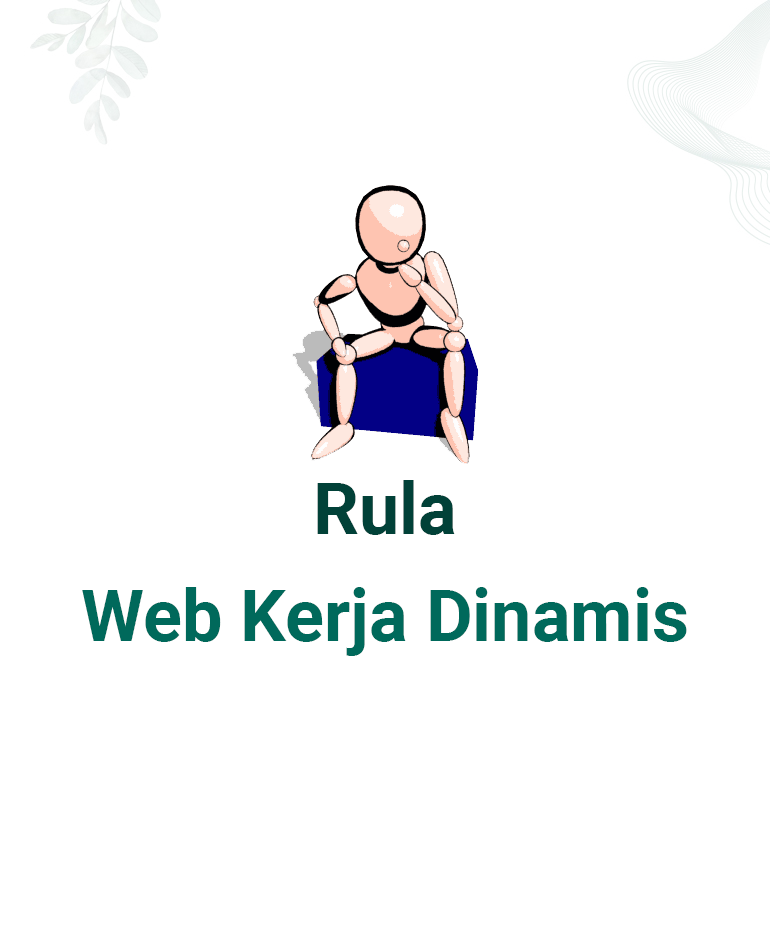
<style>
.page{position:relative;width:770px;height:927px;background:#ffffff}
.page>*{position:absolute;margin:0}
.t1{font:72px "Roboto-Bold";color:#014138}
.t2{font:72px "Roboto-Bold";color:#00695b}
</style>
<div class="page">
<p class="t1" style="left:317px;top:480px;width:138px;height:55px">Rula</p>
<p class="t2" style="left:82px;top:587px;width:605px;height:69px">Web Kerja Dinamis</p>
</div>
